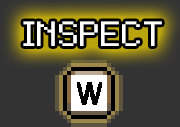
<style>
.page{position:relative;width:180px;height:127px;background:#333333}
.page>*{position:absolute;margin:0}
.t1{font:49px "Silver";color:#ffffff;scale:1.3 1}
</style>
<div class="page">
<p class="t1" style="left:23px;top:21px;width:139px;height:25px">INSPECT</p>
</div>
